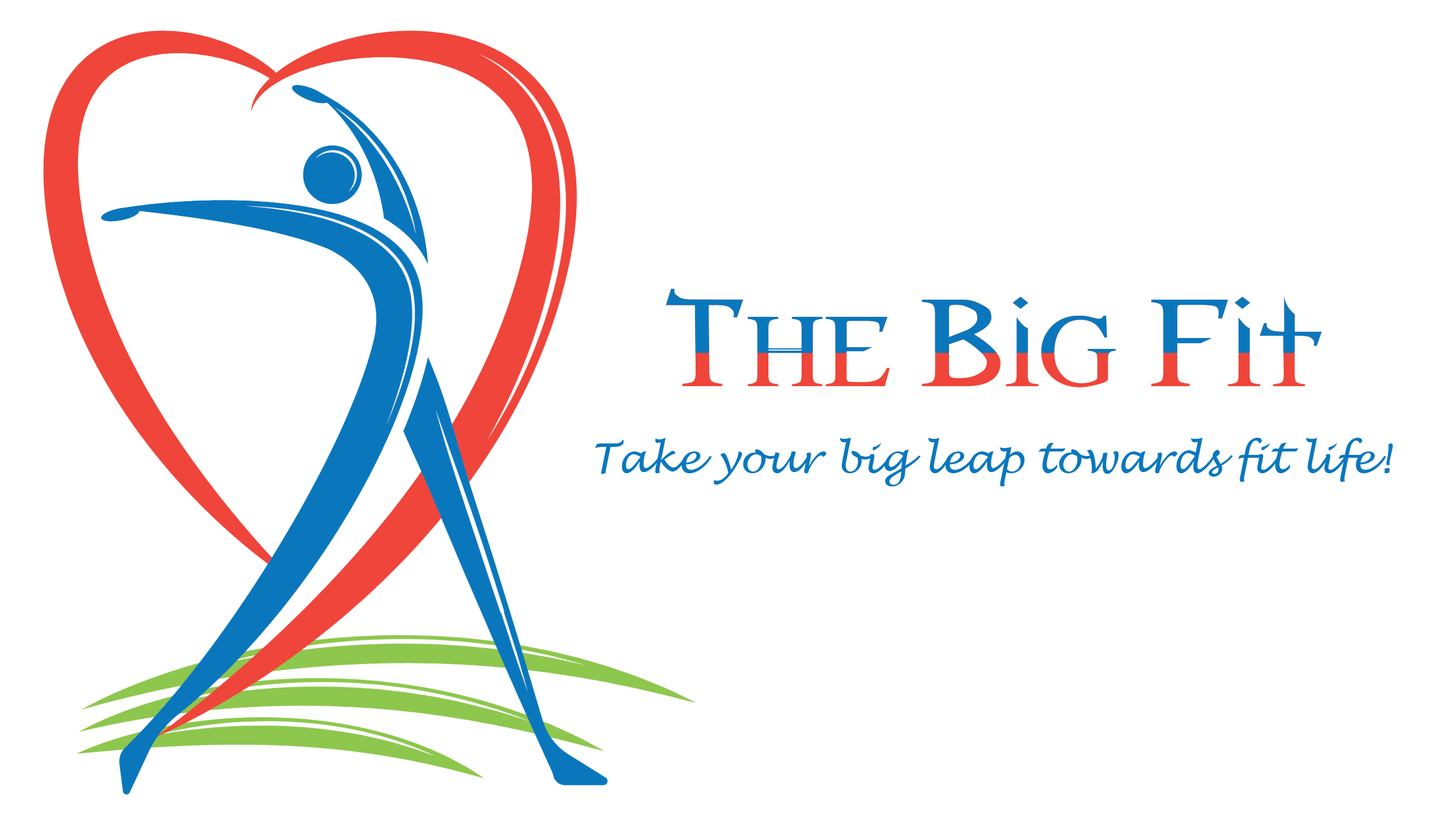
<style>
.page{position:relative;width:1445px;height:825px;background:#ffffff}
.page>*{position:absolute;margin:0}
.t1{font:114.6px "Morpheus";scale:1.26 1}
.t2{font:41.3px "LucidaHandwriting-Italic";color:#0a77bd}
</style>
<div class="page">
<p class="t1" style="left:666px;top:289px;width:655px;height:99px">The Big Fit</p>
<p class="t2" style="left:595px;top:438px;width:797px;height:49px">Take your big leap towards fit life!</p>
</div>
